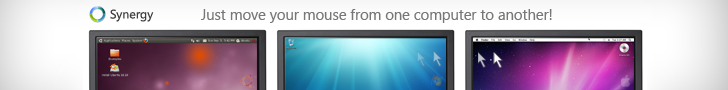
<style>
.page{position:relative;width:728px;height:90px}
.page>*{position:absolute;margin:0}
.t1{font:12.4px "SegoeUI";color:#3f3f3f}
.t2{font:14.7px "SegoeUI";color:#777777}
</style>
<div class="page">
<p class="t1" style="left:110px;top:9px;width:44px;height:13px">Synergy</p>
<p class="t2" style="left:201px;top:9px;width:351px;height:14px">Just move your mouse from one computer to another!</p>
</div>
